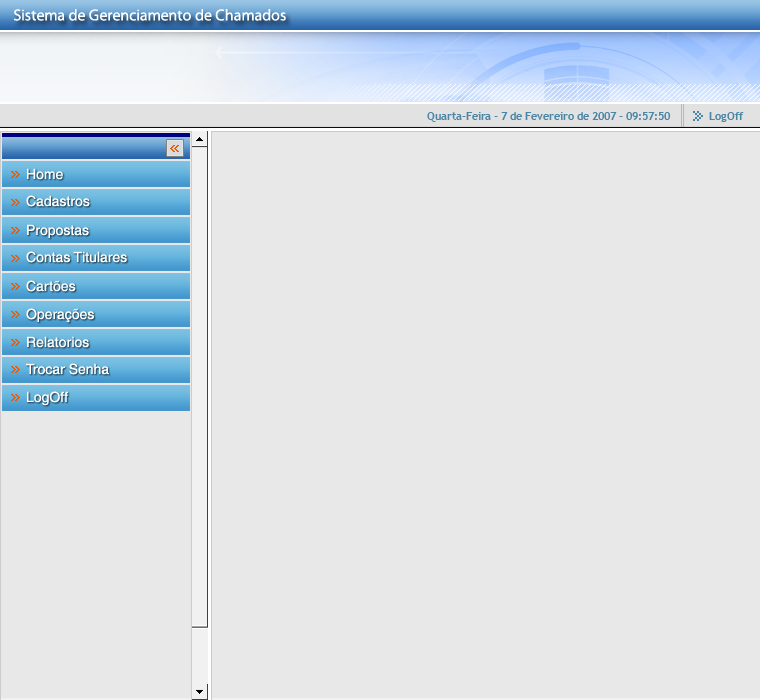
<style>
.page{position:relative;width:760px;height:700px;background:#e8e8e8}
.page>*{position:absolute;margin:0}
.t1{font:16px "MyriadPro-Regular";color:#fefefe}
.t2{font:11px "TrebuchetMS-Bold";color:#4985a5}
.t3{font:14px "Helvetica";color:#ffffff}
</style>
<div class="page">
<p class="t1" style="left:14px;top:9px;width:272px;height:12px">Sistema de Gerenciamento de Chamados</p>
<p class="t2" style="left:427px;top:112px;width:244px;height:10px">Quarta-Feira - 7 de Fevereiro de 2007 - 09:57:50</p>
<p class="t2" style="left:709px;top:112px;width:35px;height:10px">LogOff</p>
<p class="t3" style="left:27px;top:168px;width:36px;height:12px">Home</p>
<p class="t3" style="left:26px;top:195px;width:64px;height:12px">Cadastros</p>
<p class="t3" style="left:27px;top:224px;width:62px;height:14px">Propostas</p>
<p class="t3" style="left:26px;top:251px;width:101px;height:12px">Contas Titulares</p>
<p class="t3" style="left:26px;top:280px;width:50px;height:12px">Cartões</p>
<p class="t3" style="left:26px;top:308px;width:68px;height:15px">Operações</p>
<p class="t3" style="left:27px;top:336px;width:62px;height:12px">Relatorios</p>
<p class="t3" style="left:26px;top:363px;width:83px;height:12px">Trocar Senha</p>
<p class="t3" style="left:27px;top:391px;width:41px;height:15px">LogOff</p>
</div>
